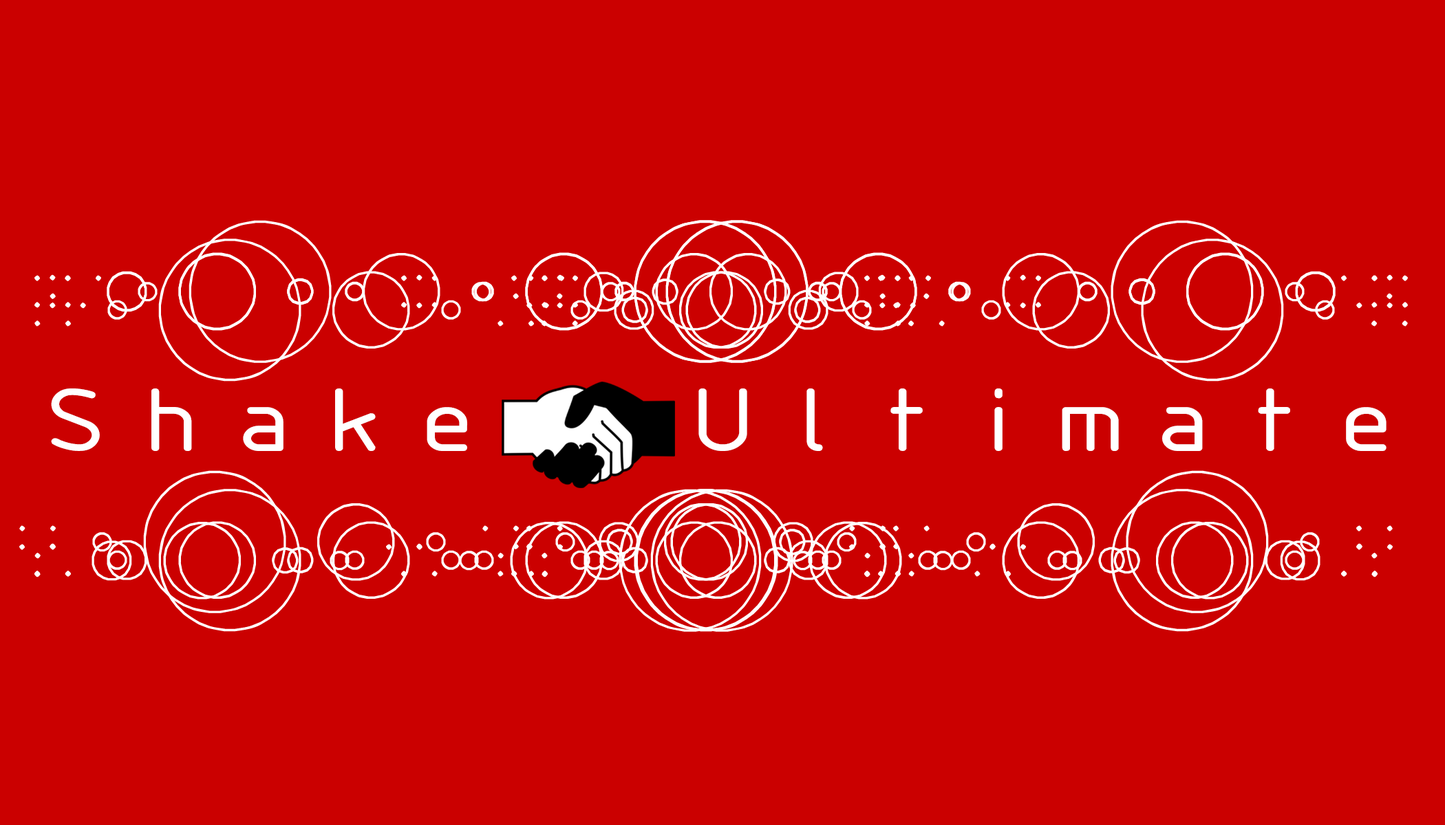
<style>
.page{position:relative;width:1445px;height:825px;background:#cb0000}
.page>*{position:absolute;margin:0}
.t1{font:88.9px "SWLink";color:#ffffff;font-weight:bold;scale:1.3 1}
</style>
<div class="page">
<p class="t1" style="left:51px;top:389px;width:1335px;height:62px">Shake  Ultimate</p>
</div>
